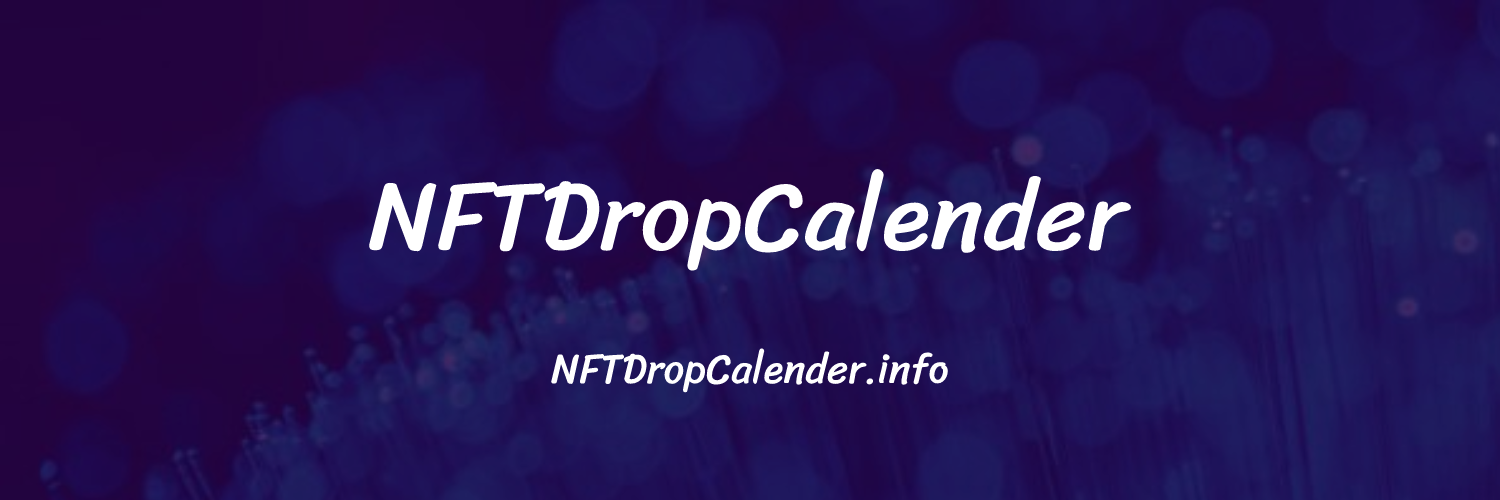
<style>
.page{position:relative;width:1500px;height:500px}
.page>*{position:absolute;margin:0}
.t1{font:99px "Sriracha-Regular";color:#ffffff}
.t2{font:42.8px "Sriracha-Regular";color:#ffffff;scale:0.96 1}
</style>
<div class="page">
<p class="t1" style="left:369px;top:169px;width:762px;height:102px">NFTDropCalender</p>
<p class="t2" style="left:551px;top:348px;width:397px;height:45px">NFTDropCalender.info</p>
</div>
